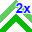
<style>
.page{position:relative;width:32px;height:32px;background:#ffffff}
.page>*{position:absolute;margin:0}
.t1{font:14px "Arial-BoldMT";color:#0d13ff}
</style>
<div class="page">
<p class="t1" style="left:16px;top:3px;width:15px;height:10px">2x</p>
</div>
